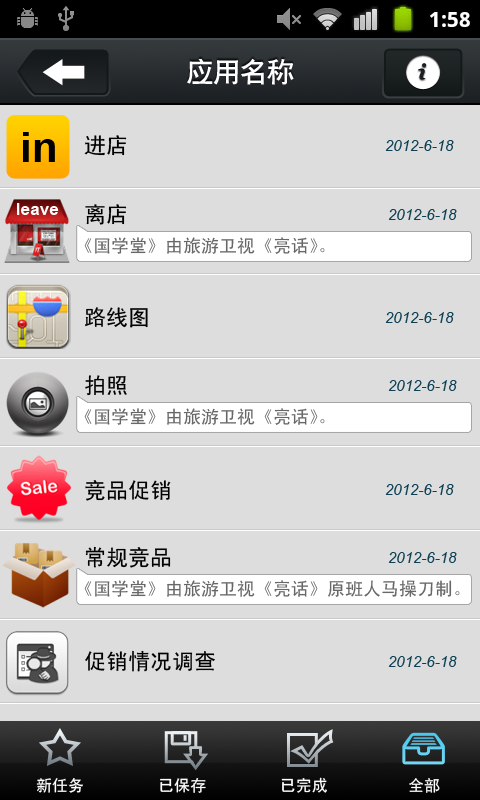
<style>
.page{position:relative;width:480px;height:800px;background:#dddddd}
.page>*{position:absolute;margin:0}
.t1{font:27px "CTCuHeiSJ";color:#ffffff}
.t2{font:42px "Arial-BoldMT";color:#000000}
.t3{font:22px "SimHei";color:#000000}
.t4{font:15px "Arial-ItalicMT";color:#0e4054}
.t5{font:17.3px "Arial-BoldMT";color:#fefefe}
.t6{font:18px "SimHei";color:#676767}
.t7{font:16px "SimHei";color:#ffffff}
</style>
<div class="page">
<p class="t1" style="left:187px;top:58px;width:107px;height:27px">应用名称</p>
<p class="t2" style="left:23px;top:132px;width:32px;height:30px">in</p>
<p class="t3" style="left:84px;top:135px;width:43px;height:21px">进店</p>
<p class="t4" style="left:385px;top:140px;width:69px;height:11px">2012-6-18</p>
<p class="t5" style="left:17px;top:203px;width:42px;height:12px">leave</p>
<p class="t3" style="left:85px;top:204px;width:42px;height:21px">离店</p>
<p class="t4" style="left:388px;top:209px;width:69px;height:11px">2012-6-18</p>
<p class="t6" style="left:84px;top:237px;width:241px;height:17px">《国学堂》由旅游卫视《亮话》。</p>
<p class="t3" style="left:85px;top:307px;width:63px;height:21px">路线图</p>
<p class="t4" style="left:385px;top:312px;width:69px;height:11px">2012-6-18</p>
<p class="t3" style="left:85px;top:375px;width:42px;height:21px">拍照</p>
<p class="t4" style="left:388px;top:380px;width:69px;height:11px">2012-6-18</p>
<p class="t6" style="left:84px;top:408px;width:241px;height:17px">《国学堂》由旅游卫视《亮话》。</p>
<p class="t3" style="left:85px;top:480px;width:86px;height:21px">竞品促销</p>
<p class="t4" style="left:385px;top:484px;width:69px;height:11px">2012-6-18</p>
<p class="t3" style="left:85px;top:546px;width:86px;height:22px">常规竞品</p>
<p class="t4" style="left:388px;top:552px;width:69px;height:11px">2012-6-18</p>
<p class="t6" style="left:84px;top:580px;width:376px;height:17px">《国学堂》由旅游卫视《亮话》原班人马操刀制。</p>
<p class="t3" style="left:85px;top:650px;width:130px;height:22px">促销情况调查</p>
<p class="t4" style="left:388px;top:656px;width:69px;height:11px">2012-6-18</p>
<p class="t7" style="left:36px;top:778px;width:47px;height:15px">新任务</p>
<p class="t7" style="left:160px;top:778px;width:46px;height:15px">已保存</p>
<p class="t7" style="left:281px;top:777px;width:46px;height:16px">已完成</p>
<p class="t7" style="left:409px;top:778px;width:31px;height:15px">全部</p>
</div>
